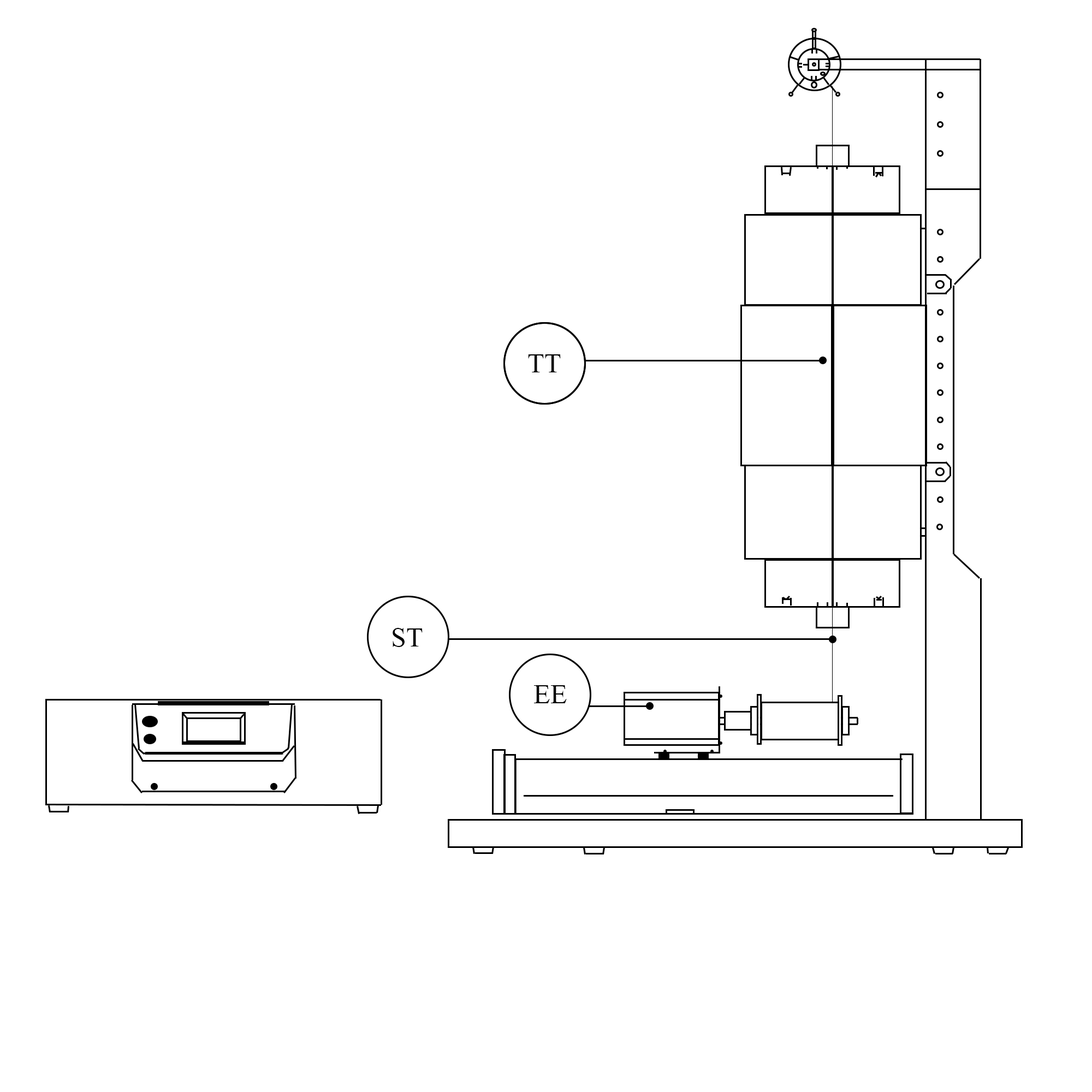
<style>
.page{position:relative;width:1092px;height:1092px;background:#ffffff}
.page>*{position:absolute;margin:0}
.t1{font:27.3px "TimesNewRomanPSMT";color:#000000}
</style>
<div class="page">
<p class="t1" style="left:528px;top:354px;width:33px;height:18px">TT</p>
<p class="t1" style="left:393px;top:628px;width:30px;height:19px">ST</p>
<p class="t1" style="left:534px;top:685px;width:33px;height:18px">EE</p>
</div>
